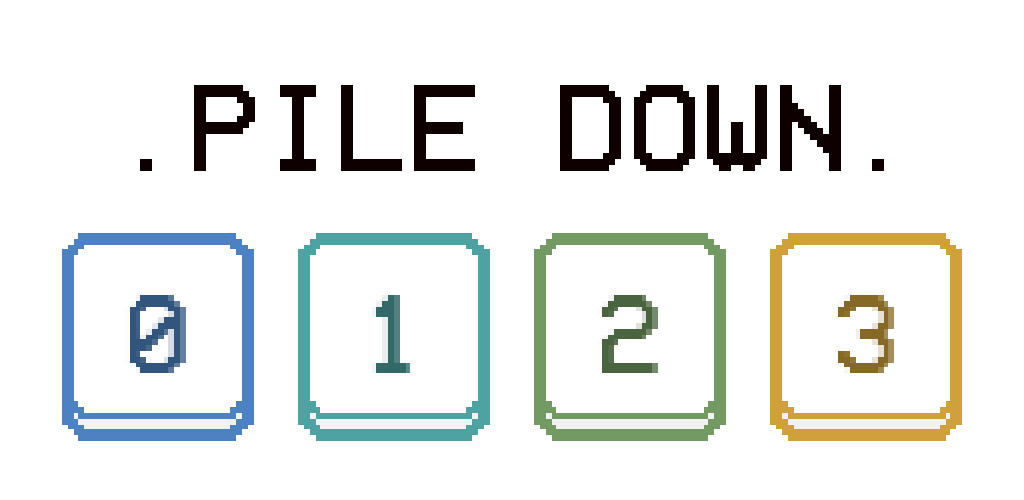
<style>
.page{position:relative;width:1024px;height:500px;background:#ffffff}
.page>*{position:absolute;margin:0}
.t1{font:125px "VCROSDMono";color:#0f0000}
</style>
<div class="page">
<p class="t1" style="left:140px;top:85px;width:744px;height:86px">.PILE DOWN.</p>
</div>
